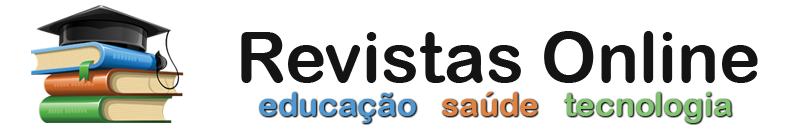
<style>
.page{position:relative;width:787px;height:140px;background:#ffffff}
.page>*{position:absolute;margin:0}
.t1{font:70px "ArialRoundedMTBold";color:#141414}
.t2{font:33px "ArialRoundedMTBold";color:#81c570}
.t3{font:33px "ArialRoundedMTBold";color:#4e99d3}
.t4{font:33px "ArialRoundedMTBold";color:#e18241}
</style>
<div class="page">
<p class="t1" style="left:241px;top:31px;width:517px;height:52px">Revistas Online</p>
<p class="t2" style="left:259px;top:92px;width:473px;height:31px"><span class="t3">educação   </span><span class="t4">saúde   </span>tecnologia</p>
</div>
